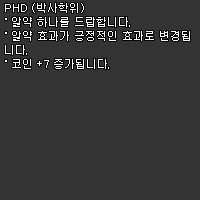
<style>
.page{position:relative;width:200px;height:200px;background:#333333}
.page>*{position:absolute;margin:0}
.t1{font:11px/14px "Dotum";color:#ffffff}
</style>
<div class="page">
<p class="t1" style="left:5px;top:3px;width:185px;height:66px">PHD (박사학위)<br>˚ 알약 하나를 드랍합니다.<br>˚ 알약 효과가 긍정적인 효과로 변경됩<br>니다.<br>˚ 코인 +7 증가됩니다.</p>
</div>
